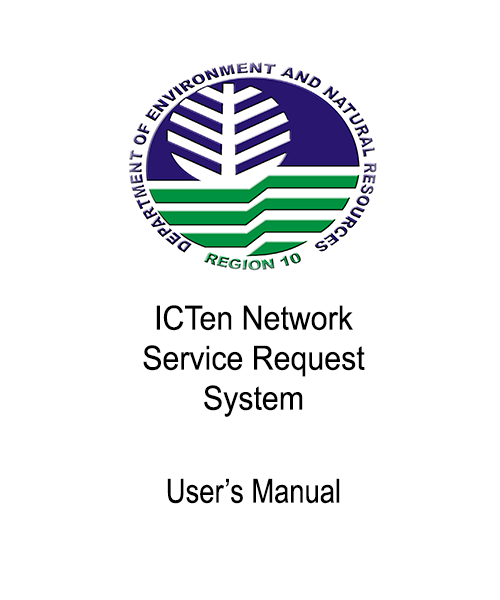
<style>
.page{position:relative;width:500px;height:600px;background:#ffffff}
.page>*{position:absolute;margin:0}
.t1{font:33.4px "ArialNarrow";color:#000000;scale:1.11 1}
.t2{font:33.5px "ArialNarrow";color:#000000}
</style>
<div class="page">
<p class="t1" style="left:143px;top:305px;width:222px;height:112px;text-align:center">ICTen Network<br>Service Request<br>System</p>
<p class="t2" style="left:167px;top:478px;width:173px;height:26px">User’s Manual</p>
</div>
